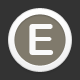
<style>
.page{position:relative;width:80px;height:80px;background:#333333}
.page>*{position:absolute;margin:0}
.t1{font:43px "ArialRoundedMTBold";color:#fafafa}
</style>
<div class="page">
<p class="t1" style="left:29px;top:24px;width:25px;height:31px">E</p>
</div>
